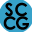
<style>
.page{position:relative;width:32px;height:32px;background:#36a1c9}
.page>*{position:absolute;margin:0}
.t1{font:18px "CenturyGothic-Bold";letter-spacing:0.02em;color:#000000}
.t2{font:18px "CenturyGothic-Bold";letter-spacing:-0.1em;color:#000000}
</style>
<div class="page">
<p class="t1" style="left:5px;top:2px;width:23px;height:15px">SC</p>
<p class="t2" style="left:3px;top:16px;width:26px;height:14px">CG</p>
</div>
